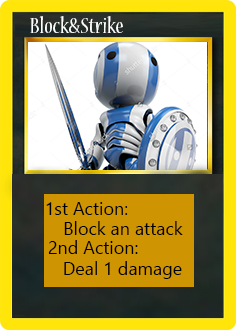
<style>
.page{position:relative;width:236px;height:330px}
.page>*{position:absolute;margin:0}
.t1{font:24px "NuevaStd-Cond";color:#ffffff}
.t2{font:18px "LeelawadeeUI";color:#000000}
</style>
<div class="page">
<p class="t1" style="left:30px;top:16px;width:93px;height:17px">Block&amp;Strike</p>
<p class="t2" style="left:46px;top:202px;width:82px;height:13px">1st Action:</p>
<p class="t2" style="left:64px;top:221px;width:119px;height:14px">Block an attack</p>
<p class="t2" style="left:48px;top:240px;width:134px;height:39px">2nd Action:<br>   Deal 1 damage</p>
</div>
